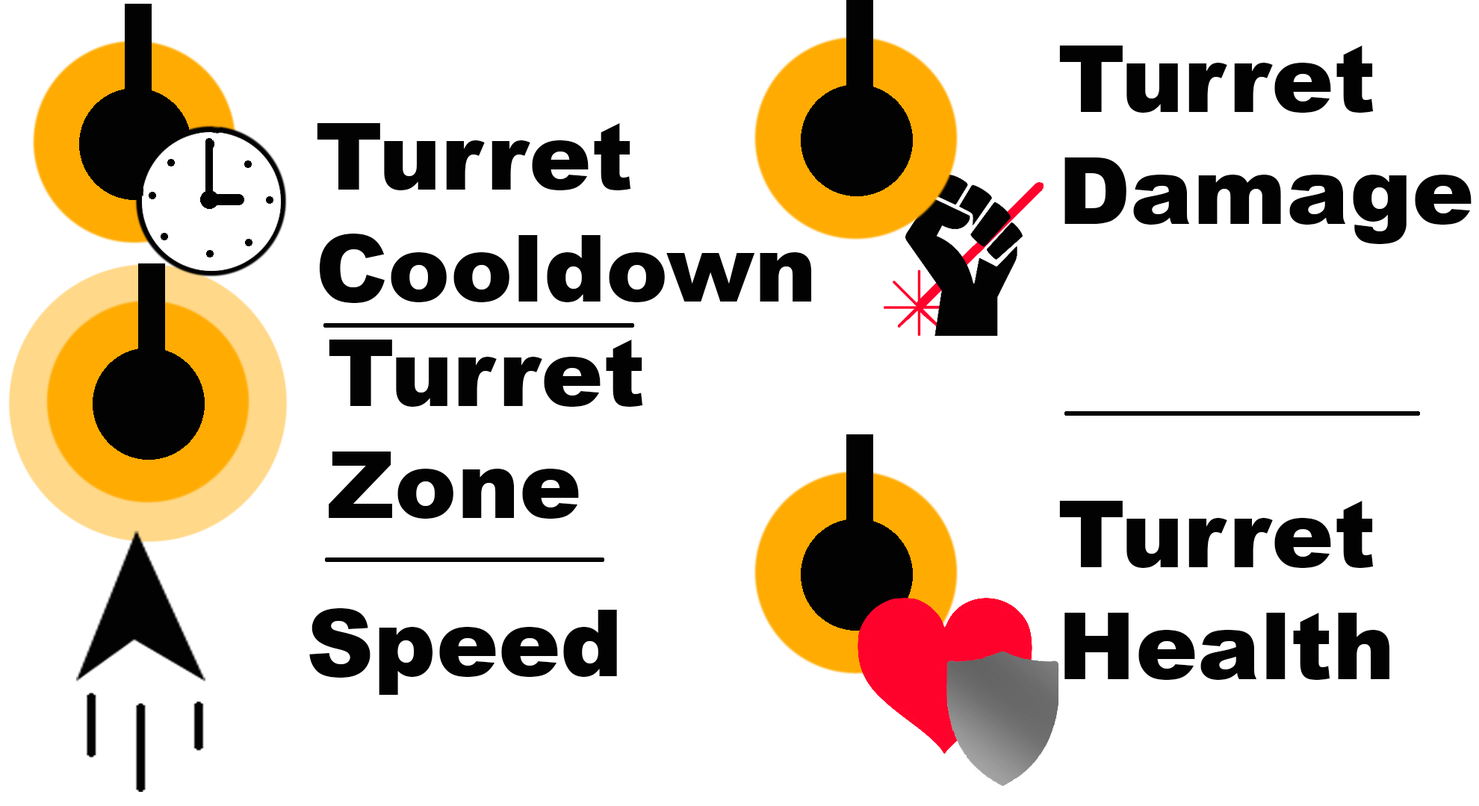
<style>
.page{position:relative;width:1479px;height:806px;background:#ffffff}
.page>*{position:absolute;margin:0}
.t1{font:93.3px "Arial-Black";color:#020202}
</style>
<div class="page">
<p class="t1" style="left:1059px;top:46px;width:412px;height:198px">Turret<br>Damage</p>
<p class="t1" style="left:317px;top:123px;width:495px;height:180px">Turret<br>Cooldown</p>
<p class="t1" style="left:329px;top:340px;width:314px;height:179px">Turret<br>Zone</p>
<p class="t1" style="left:1059px;top:501px;width:331px;height:179px">Turret<br>Health</p>
<p class="t1" style="left:309px;top:609px;width:308px;height:86px">Speed</p>
</div>
